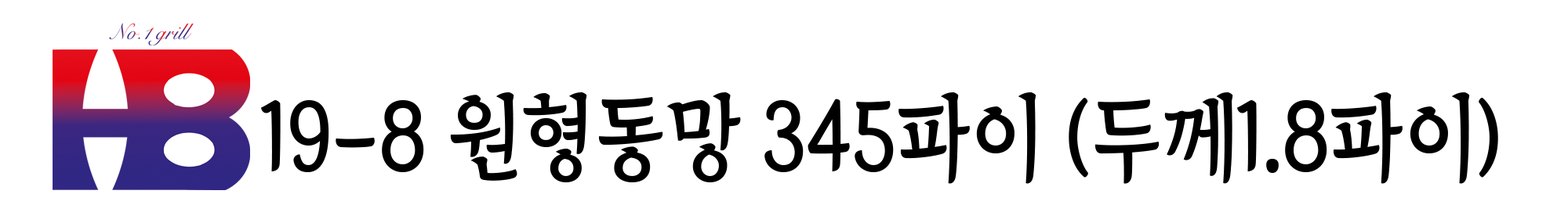
<style>
.page{position:relative;width:1568px;height:205px;background:#ffffff}
.page>*{position:absolute;margin:0}
.t1{font:93.7px "TheIndependenceHallofKorea-Regular";color:#000000;scale:0.89 1}
</style>
<div class="page">
<p class="t1" style="left:261px;top:93px;width:1237px;height:91px">19-8 원형동망 345파이 (두께1.8파이)</p>
</div>
